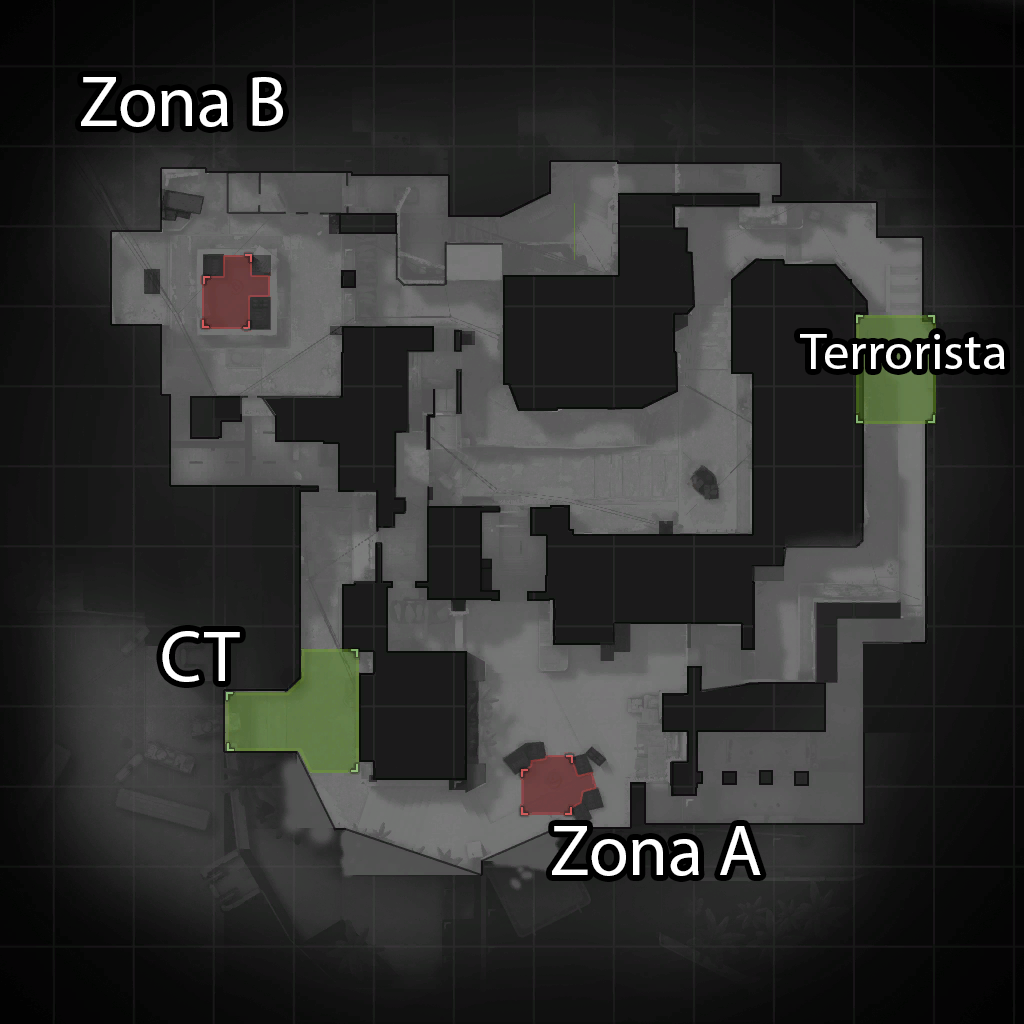
<style>
.page{position:relative;width:1024px;height:1024px}
.page>*{position:absolute;margin:0}
.t1{font:72px "MyriadPro-Regular";color:#ffffff}
.t2{font:50.4px "MyriadPro-Regular";color:#ffffff;scale:1.06 1}
</style>
<div class="page">
<p class="t1" style="left:81px;top:77px;width:202px;height:50px">Zona B</p>
<p class="t2" style="left:800px;top:334px;width:205px;height:35px">Terrorista</p>
<p class="t1" style="left:162px;top:631px;width:78px;height:51px">CT</p>
<p class="t1" style="left:552px;top:826px;width:209px;height:50px">Zona A</p>
</div>
